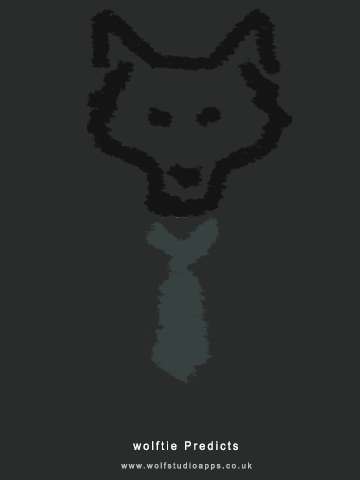
<style>
.page{position:relative;width:360px;height:480px;background:#2a2c2b}
.page>*{position:absolute;margin:0}
.t1{font:12px "ArialMT";letter-spacing:0.2em;color:#ffffff;scale:0.9 1}
.t2{font:8px "ArialMT";letter-spacing:0.2em;color:#c2c2c2}
</style>
<div class="page">
<p class="t1" style="left:133px;top:441px;width:105px;height:10px">wolftie Predicts</p>
<p class="t2" style="left:121px;top:462px;width:131px;height:8px">www.wolfstudioapps.co.uk</p>
</div>
